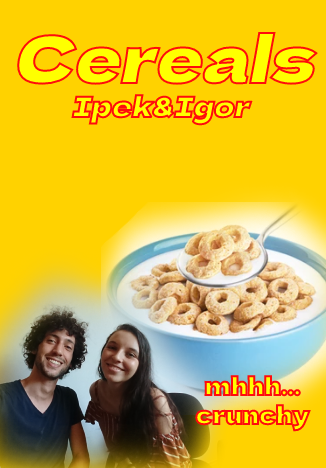
<style>
.page{position:relative;width:326px;height:468px;background:#ffd200}
.page>*{position:absolute;margin:0}
.t1{font:28px "DelaGothicOne-Regular";font-style:italic}
.t2{font:64px "DelaGothicOne-Regular";font-style:italic}
.t3{font:24px "DelaGothicOne-Regular"}
</style>
<div class="page">
<p class="t1" style="left:15px;top:32px;width:303px;height:94px;text-align:center"><span class="t2">Cereals<br></span>Ipek&amp;Igor</p>
<p class="t3" style="left:195px;top:375px;width:116px;height:57px;text-align:center">mhhh...<br>crunchy</p>
</div>
